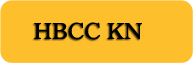
<style>
.page{position:relative;width:193px;height:63px;background:#febf2c}
.page>*{position:absolute;margin:0}
.t1{font:22.2px "ImperialBT-Roman";color:#000000}
</style>
<div class="page">
<p class="t1" style="left:34px;top:22px;width:108px;height:18px">HBCC KN</p>
</div>
